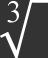
<style>
.page{position:relative;width:48px;height:58px;background:#333333}
.page>*{position:absolute;margin:0}
.t1{font:31.6px "TimesNewRomanPSMT";color:#ffffff}
</style>
<div class="page">
<p class="t1" style="left:7px;top:1px;width:12px;height:22px">3</p>
</div>
